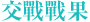
<style>
.page{position:relative;width:90px;height:22px;background:#ffffff}
.page>*{position:absolute;margin:0}
.t1{font:22px "RyuminPr6N-ExBold";color:#1dbcbf}
</style>
<div class="page">
<p class="t1" style="left:1px;top:0px;width:87px;height:21px">交戰戰果</p>
</div>
